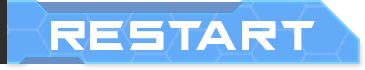
<style>
.page{position:relative;width:365px;height:70px;background:#63aaf9}
.page>*{position:absolute;margin:0}
.t1{font:45.3px "QORE";color:#ffffff}
</style>
<div class="page">
<p class="t1" style="left:51px;top:21px;width:264px;height:29px">RESTART</p>
</div>
